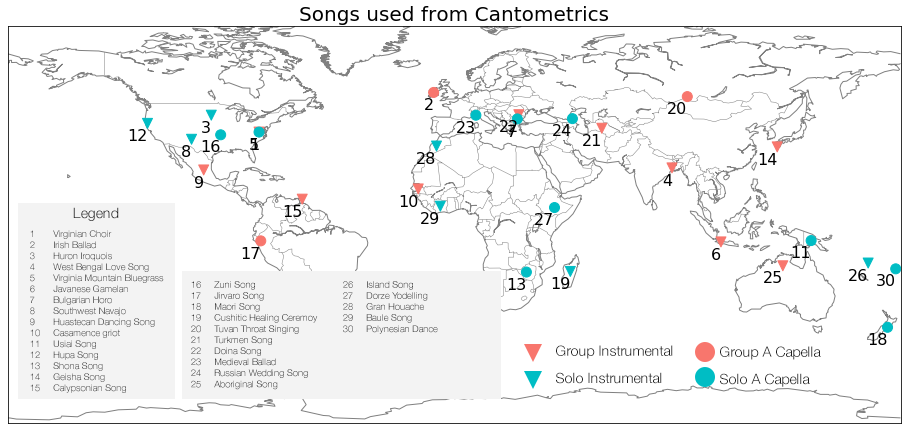
<style>
.page{position:relative;width:910px;height:435px;background:#ffffff}
.page>*{position:absolute;margin:0}
.t1{font:14.2px "HelveticaNeue-Light";color:#1f1f1f}
.t2{font:9.2px "HelveticaNeue-Light"}
</style>
<div class="page">
<p class="t1" style="left:73px;top:207px;width:46px;height:14px">Legend</p>
<p class="t2" style="left:30px;top:230px;width:134px;height:163px">1  Virginian Choir<br>2  Irish Ballad<br>3  Huron Iroquois<br>4  West Bengal Love Song<br>5  Virginia Mountain Bluegrass<br>6  Javanese Gamelan<br>7  Bulgarian Horo<br>8  Southwest Navajo<br>9 Huastecan Dancing Song<br>10  Casamence griot<br>11 Usiai Song<br>12 Hupa Song<br>13 Shona Song<br>14 Geisha Song<br>15 Calypsonian Song</p>
<p class="t2" style="left:191px;top:281px;width:127px;height:109px">16  Zuni Song<br>17  Jirvaro Song<br>18  Maori Song<br>19  Cushitic Healing Ceremoy<br>20  Tuvan Throat Singing<br>21  Turkmen Song<br>22  Doina Song<br>23  Medieval Ballad<br>24 Russian Wedding Song<br>25  Aboriginal Song</p>
<p class="t2" style="left:343px;top:281px;width:95px;height:53px">26  Island Song<br>27  Dorze Yodelling<br>28  Gran Houache<br>29  Baule Song<br>30  Polynesian Dance</p>
<p class="t1" style="left:556px;top:345px;width:117px;height:39px">Group Instrumental<br><br>Solo Instrumental</p>
<p class="t1" style="left:720px;top:346px;width:101px;height:41px">Group A Capella<br><br>Solo A Capella</p>
</div>
